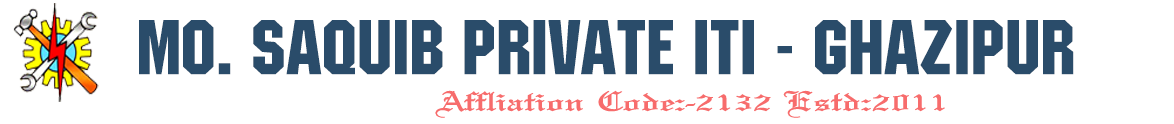
<style>
.page{position:relative;width:1174px;height:124px;background:#ffffff}
.page>*{position:absolute;margin:0}
.t1{font:76.2px "MachineITCbyBT-Regular";color:#2a4c6a}
.t2{font:29.6px "MariageNormal";color:#f76c6c;scale:1.62 1}
</style>
<div class="page">
<p class="t1" style="left:139px;top:20px;width:935px;height:55px">Mo. Saquib Private ITI - Ghazipur</p>
<p class="t2" style="left:435px;top:90px;width:510px;height:28px">Affliation Code:-2132 Estd:2011</p>
</div>
